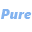
<style>
.page{position:relative;width:32px;height:32px;background:#ffffff}
.page>*{position:absolute;margin:0}
.t1{font:13.5px "SegoeUIBlack-Italic";color:#83b3ef}
</style>
<div class="page">
<p class="t1" style="left:1px;top:9px;width:31px;height:10px">Pure</p>
</div>
